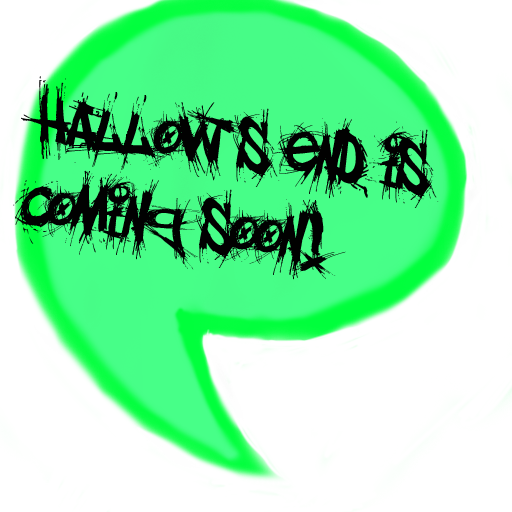
<style>
.page{position:relative;width:512px;height:512px;background:#ffffff}
.page>*{position:absolute;margin:0}
.t1{font:70.8px "el&fontgohtic!";color:#010101}
</style>
<div class="page">
<p class="t1" style="left:13px;top:76px;width:426px;height:204px;rotate:7deg">Hallow’s end is coming soon!</p>
</div>
